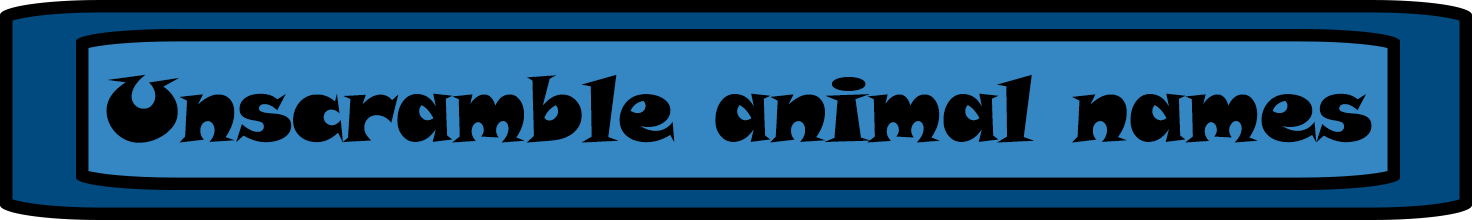
<style>
.page{position:relative;width:1472px;height:220px;background:#3587c3}
.page>*{position:absolute;margin:0}
.t1{font:90px "SnapITC-Regular";color:#000000}
</style>
<div class="page">
<p class="t1" style="left:106px;top:74px;width:1266px;height:69px">Unscramble animal names</p>
</div>
